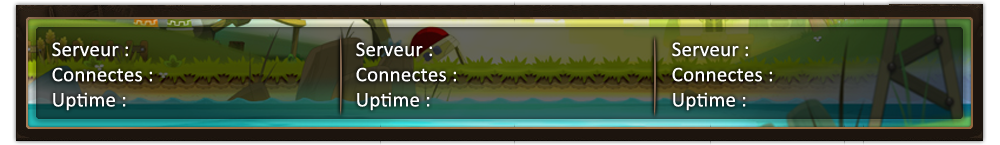
<style>
.page{position:relative;width:1000px;height:145px}
.page>*{position:absolute;margin:0}
.t1{font:21px "Calibri";letter-spacing:0.01em;color:#ffffff}
</style>
<div class="page">
<p class="t1" style="left:52px;top:42px;width:100px;height:69px">Serveur :<br>Connectes :<br>Uptime :</p>
<p class="t1" style="left:356px;top:42px;width:100px;height:69px">Serveur :<br>Connectes :<br>Uptime :</p>
<p class="t1" style="left:672px;top:42px;width:100px;height:69px">Serveur :<br>Connectes :<br>Uptime :</p>
</div>
